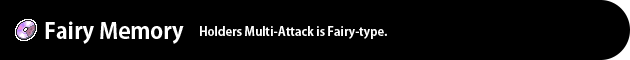
<style>
.page{position:relative;width:630px;height:60px;background:#000000}
.page>*{position:absolute;margin:0}
.t1{font:22px "AdobeGothicStd-Bold";color:#ffffff}
.t2{font:12px "AdobeGothicStd-Bold";color:#ffffff}
</style>
<div class="page">
<p class="t1" style="left:45px;top:21px;width:139px;height:23px">Fairy Memory</p>
<p class="t2" style="left:200px;top:26px;width:187px;height:13px">Holders Multi-Attack is Fairy-type.</p>
</div>
